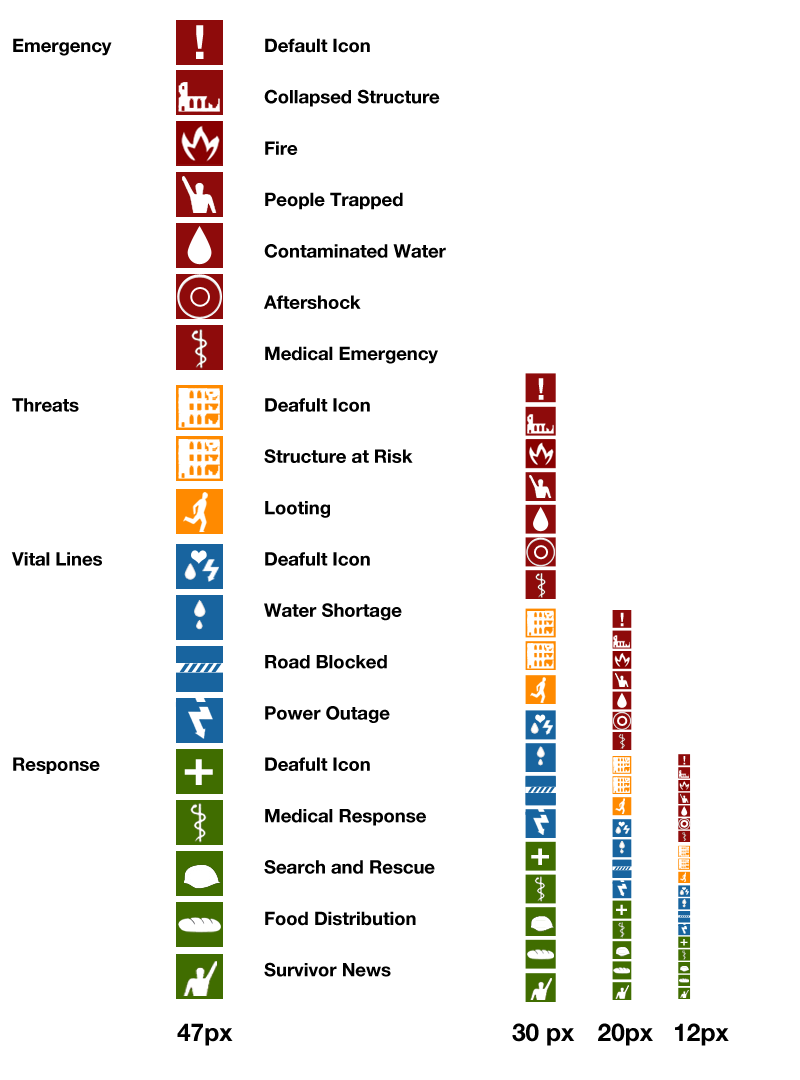
<style>
.page{position:relative;width:800px;height:1080px;background:#ffffff}
.page>*{position:absolute;margin:0}
.t1{font:47.3px "HelveticaNeue-Bold";color:#ffffff}
.t2{font:18.5px/51.3px "HelveticaNeue-Bold";color:#000000}
.t3{font:30.3px "HelveticaNeue-Bold";color:#ffffff}
.t4{font:18.8px "HelveticaNeue-Bold";color:#ffffff}
.t5{font:51.1px "HelveticaNeue-Bold";color:#ffffff;scale:1.08 1}
.t6{font:11.8px "HelveticaNeue-Bold";color:#ffffff}
.t7{font:32.7px "HelveticaNeue-Bold";color:#ffffff;scale:1.08 1}
.t8{font:20.3px "HelveticaNeue-Bold";color:#ffffff;scale:1.08 1}
.t9{font:12.7px "HelveticaNeue-Bold";color:#ffffff;scale:1.08 1}
.t10{font:24.5px "HelveticaNeue-Bold";color:#000000}
</style>
<div class="page">
<p class="t1" style="left:196px;top:25px;width:8px;height:34px">!</p>
<p class="t2" style="left:11px;top:38px;width:435px;height:939px">Emergency     Default Icon<br>       Collapsed Structure<br>       Fire<br>       People Trapped<br>       Contaminated Water<br>       Aftershock<br>       Medical Emergency<br>Threats      Deafult Icon<br>       Structure at Risk    <br>       Looting<br>Vital Lines     Deafult Icon<br>       Water Shortage<br>       Road Blocked<br>       Power Outage<br>Response     Deafult Icon<br>       Medical Response<br>       Search and Rescue <br>       Food Distribution<br>       Survivor News</p>
<p class="t3" style="left:538px;top:378px;width:6px;height:22px">!</p>
<p class="t4" style="left:620px;top:612px;width:4px;height:15px">!</p>
<p class="t5" style="left:184px;top:759px;width:29px;height:26px">+</p>
<p class="t6" style="left:683px;top:756px;width:3px;height:9px">!</p>
<p class="t7" style="left:531px;top:848px;width:18px;height:17px">+</p>
<p class="t8" style="left:616px;top:904px;width:11px;height:11px">+</p>
<p class="t9" style="left:680px;top:939px;width:8px;height:7px">+</p>
<p class="t10" style="left:177px;top:1023px;width:56px;height:23px">47px</p>
<p class="t10" style="left:512px;top:1023px;width:217px;height:23px">30 px   20px   12px</p>
</div>
